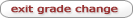
<style>
.page{position:relative;width:133px;height:18px;background:#ffffff}
.page>*{position:absolute;margin:0}
.t1{font:9px "Verdana";letter-spacing:-0.02em;color:#993333;font-weight:bold;scale:1.3 1}
</style>
<div class="page">
<p class="t1" style="left:11px;top:5px;width:107px;height:9px">exit grade change</p>
</div>
